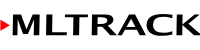
<style>
.page{position:relative;width:200px;height:50px;background:#ffffff}
.page>*{position:absolute;margin:0}
.t1{font:28.9px "LuxiSans-Bold";color:#000000;scale:1.39 1}
</style>
<div class="page">
<p class="t1" style="left:12px;top:13px;width:190px;height:23px">MLTRACK</p>
</div>
